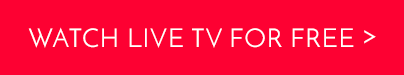
<style>
.page{position:relative;width:404px;height:75px;background:#fd0132}
.page>*{position:absolute;margin:0}
.t1{font:26.1px "JosefinSans";letter-spacing:0.025em;color:#ffffff}
</style>
<div class="page">
<p class="t1" style="left:28px;top:27px;width:348px;height:21px">WATCH LIVE TV FOR FREE &gt;</p>
</div>
